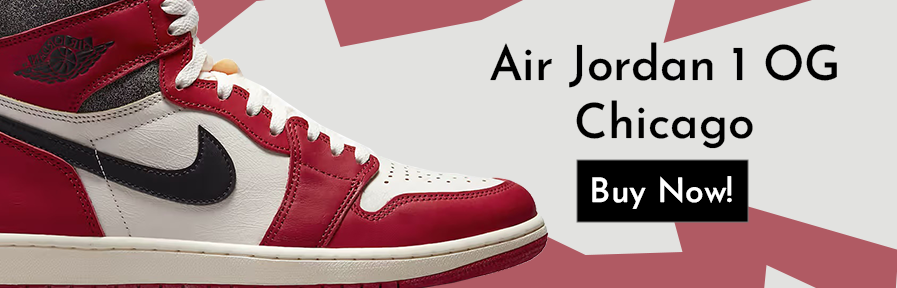
<style>
.page{position:relative;width:897px;height:288px;background:#e2e2e0}
.page>*{position:absolute;margin:0}
.t1{font:48.4px "JosefinSansRoman-Medium";color:#000000}
.t2{font:33.8px "JosefinSansRoman-Medium";color:#ffffff}
</style>
<div class="page">
<p class="t1" style="left:490px;top:42px;width:347px;height:107px;text-align:center">Air Jordan 1 OG<br>Chicago</p>
<p class="t2" style="left:592px;top:176px;width:140px;height:33px">Buy Now!</p>
</div>
